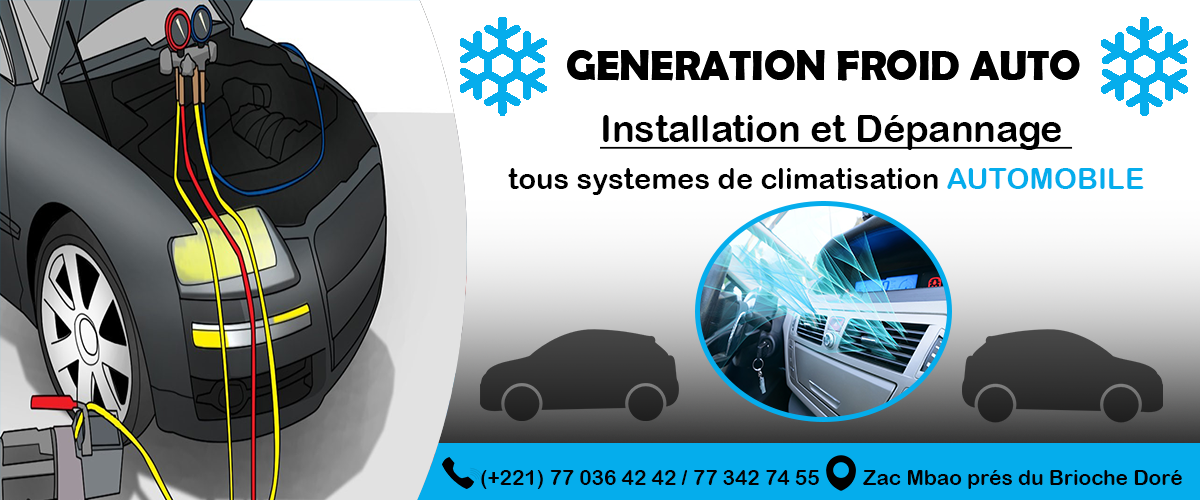
<style>
.page{position:relative;width:1200px;height:500px;background:#ffffff}
.page>*{position:absolute;margin:0}
.t1{font:41.7px "BerlinSansFBDemi-Bold";color:#000000}
.t2{font:37.5px "ArialRoundedMTBold";color:#000000;text-decoration:underline}
.t3{font:29.2px "ArialRoundedMTBold";color:#000000}
.t4{font:29.2px "ArialRoundedMTBold";color:#05adec}
.t5{font:20.8px "ArialRoundedMTBold";color:#020202}
</style>
<div class="page">
<p class="t1" style="left:567px;top:50px;width:513px;height:31px">GENERATION FROID AUTO</p>
<p class="t1" style="left:567px;top:50px;width:513px;height:31px">GENERATION FROID AUTO</p>
<p class="t2" style="left:600px;top:115px;width:473px;height:35px">Installation et Dépannage</p>
<p class="t3" style="left:508px;top:168px;width:636px;height:27px">tous systemes de climatisation <span class="t4">AUTOMOBILE</span></p>
<p class="t5" style="left:481px;top:470px;width:338px;height:19px">(+221) 77 036 42 42 / 77 342 74 55</p>
<p class="t5" style="left:863px;top:470px;width:319px;height:19px">Zac Mbao prés du Brioche Doré</p>
</div>
